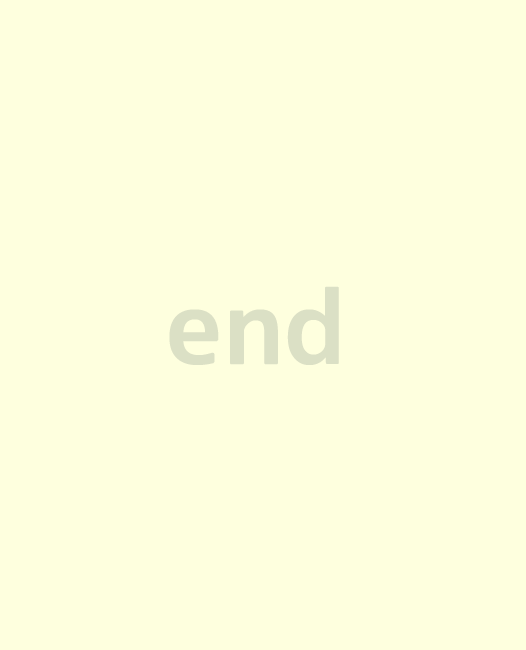
<style>
.page{position:relative;width:526px;height:650px;background:#feffde}
.page>*{position:absolute;margin:0}
.t1{font:103px "07YasashisaGothicBold";color:#dbe0c5}
</style>
<div class="page">
<p class="t1" style="left:169px;top:286px;width:170px;height:79px">end</p>
</div>
